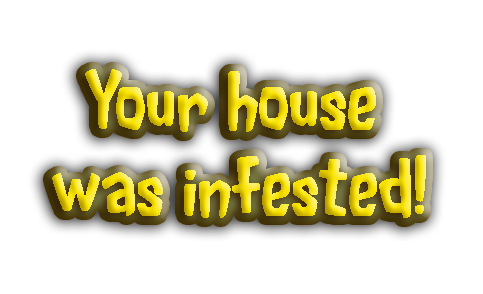
<style>
.page{position:relative;width:483px;height:294px;background:#ffffff}
.page>*{position:absolute;margin:0}
.t1{font:72px "FluffySlacksBTN"}
</style>
<div class="page">
<p class="t1" style="left:52px;top:69px;width:374px;height:149px;text-align:center">Your house<br> was infested!</p>
</div>
